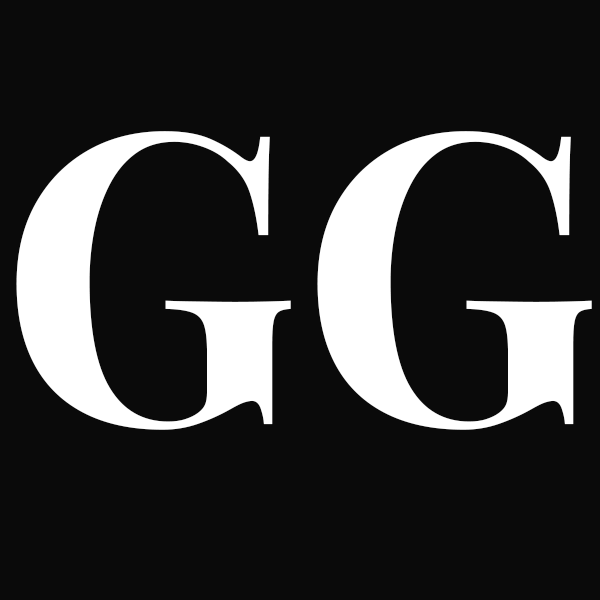
<style>
.page{position:relative;width:600px;height:600px;background:#0a0a0a}
.page>*{position:absolute;margin:0}
.t1{font:405.5px "PlayfairDisplayRoman-Bold";color:#ffffff;text-transform:uppercase}
</style>
<div class="page">
<p class="t1" style="left:16px;top:131px;width:576px;height:299px">GG</p>
</div>
